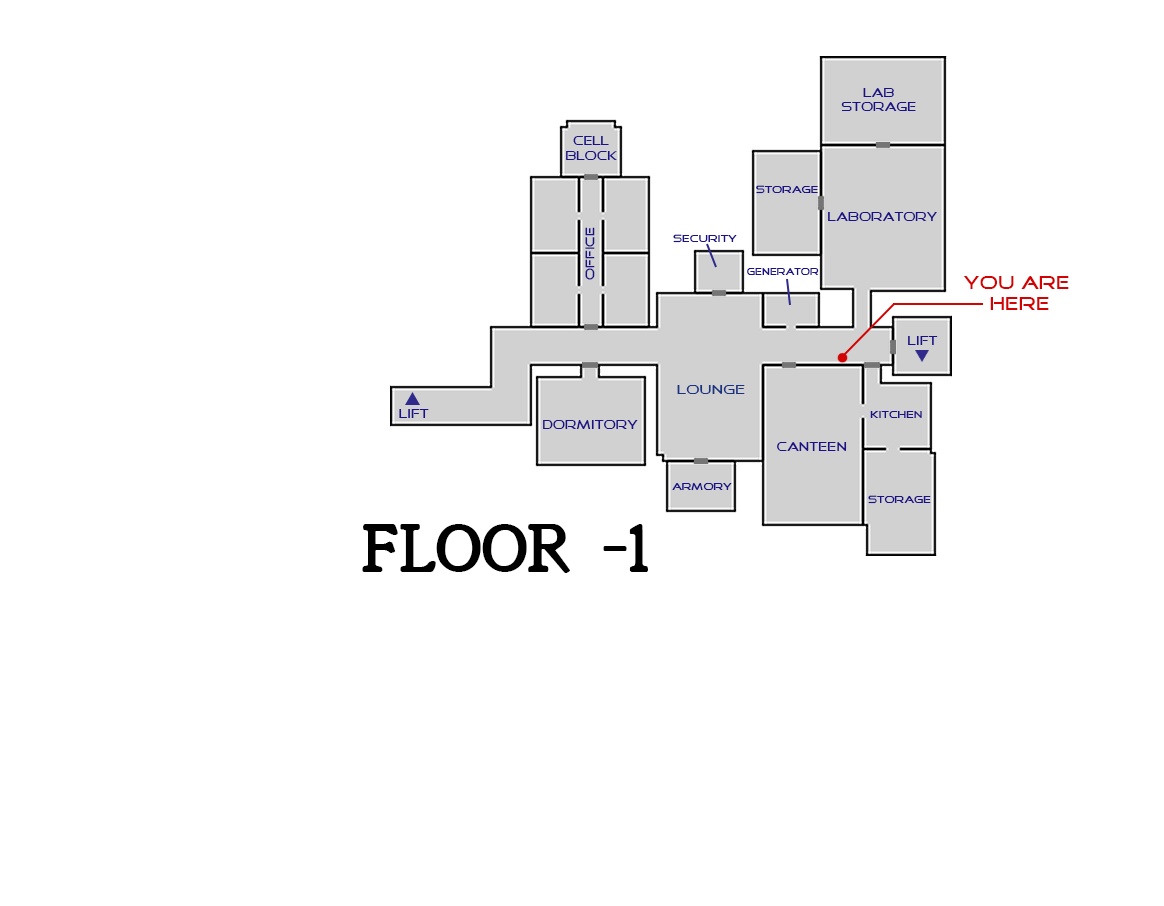
<style>
.page{position:relative;width:1164px;height:906px;background:#ffffff}
.page>*{position:absolute;margin:0}
.t1{font:12px "GoodTimes";color:#1a1186}
.t2{font:10px "GoodTimes";color:#1a1186}
.t3{font:9px "GoodTimes";color:#1a1186}
.t4{font:18px "GoodTimes";color:#d30303}
.t5{font:13px "GoodTimes";color:#193282}
.t6{font:60px "Italianate";color:#000000}
</style>
<div class="page">
<p class="t1" style="left:841px;top:88px;width:75px;height:23px;text-align:center">lab<br>storage</p>
<p class="t1" style="left:566px;top:136px;width:51px;height:24px;text-align:center">cell<br>block</p>
<p class="t2" style="left:756px;top:185px;width:62px;height:9px">storage</p>
<p class="t1" style="left:828px;top:212px;width:109px;height:9px">laboratory</p>
<p class="t1" style="left:585px;top:227px;width:10px;height:53px;rotate:-90deg">office</p>
<p class="t2" style="left:673px;top:234px;width:64px;height:9px">security</p>
<p class="t3" style="left:747px;top:268px;width:72px;height:7px">GEnerator</p>
<p class="t4" style="left:963px;top:276px;width:106px;height:34px;text-align:center">you are<br> here</p>
<p class="t1" style="left:908px;top:336px;width:30px;height:9px">lift</p>
<p class="t5" style="left:677px;top:385px;width:68px;height:9px">lounge</p>
<p class="t1" style="left:399px;top:409px;width:30px;height:9px">lift</p>
<p class="t2" style="left:870px;top:411px;width:52px;height:7px">kitchen</p>
<p class="t1" style="left:543px;top:420px;width:95px;height:9px">dormitory</p>
<p class="t1" style="left:777px;top:442px;width:70px;height:9px">canteen</p>
<p class="t2" style="left:672px;top:483px;width:60px;height:7px">armory</p>
<p class="t2" style="left:868px;top:495px;width:63px;height:9px">storage</p>
<p class="t6" style="left:362px;top:524px;width:286px;height:49px">FLOOR -1</p>
</div>
